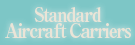
<style>
.page{position:relative;width:135px;height:45px;background:#7dc6c6}
.page>*{position:absolute;margin:0}
.t1{font:20px/16px "RyuminPro-ExBold";letter-spacing:-0.08em;color:#f1e6d8;scale:0.9 1}
</style>
<div class="page">
<p class="t1" style="left:5px;top:7px;width:126px;height:32px;text-align:center">Standard<br>Aircraft Carriers</p>
</div>
